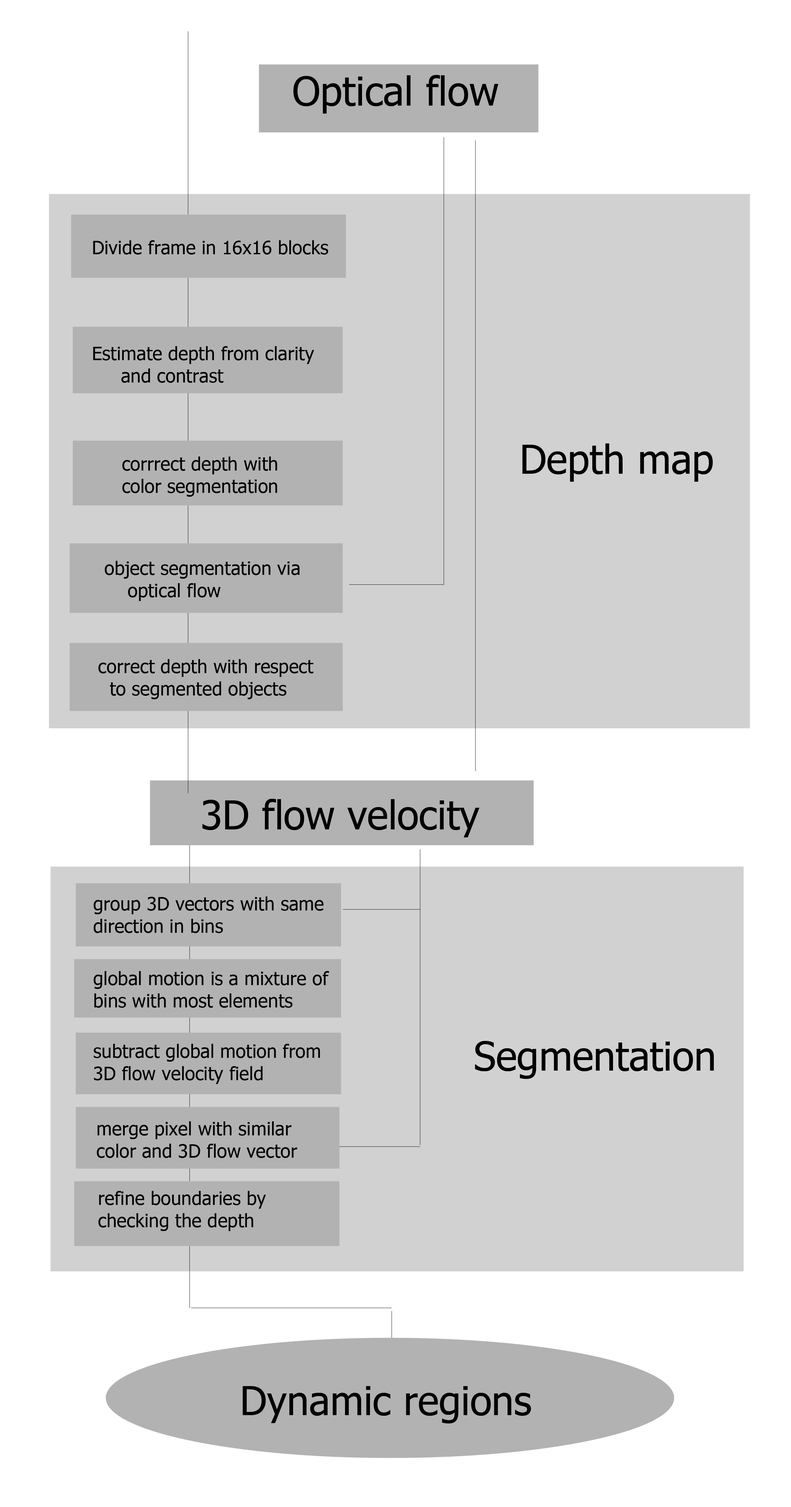
<style>
.page{position:relative;width:791px;height:1507px;background:#d1d1d1}
.page>*{position:absolute;margin:0}
.t1{font:39.9px "Tahoma";color:#000000}
.t2{font:18.6px "Tahoma";color:#000000}
</style>
<div class="page">
<p class="t1" style="left:294px;top:75px;width:204px;height:39px">Optical flow</p>
<p class="t2" style="left:93px;top:240px;width:235px;height:15px">Divide frame in 16x16 blocks</p>
<p class="t2" style="left:93px;top:346px;width:221px;height:37px">Estimate depth from clarity <br>     and contrast</p>
<p class="t1" style="left:523px;top:443px;width:190px;height:39px">Depth map</p>
<p class="t2" style="left:122px;top:457px;width:155px;height:40px">corrrect depth with <br>color segmentation</p>
<p class="t2" style="left:105px;top:561px;width:195px;height:40px">object segmentation via<br>    optical flow</p>
<p class="t2" style="left:98px;top:659px;width:216px;height:40px">correct depth with respect <br>  to segmented objects</p>
<p class="t1" style="left:202px;top:799px;width:278px;height:38px">3D flow velocity</p>
<p class="t2" style="left:93px;top:896px;width:230px;height:37px">group 3D vectors with same <br>direction in bins</p>
<p class="t2" style="left:93px;top:971px;width:236px;height:37px">global motion is a mixture of<br>bins with most elements</p>
<p class="t2" style="left:93px;top:1044px;width:227px;height:40px">subtract global motion from<br>3D flow velocity field</p>
<p class="t1" style="left:475px;top:1041px;width:239px;height:38px">Segmentation</p>
<p class="t2" style="left:97px;top:1121px;width:200px;height:37px">merge pixel with similar<br>color and 3D flow vector</p>
<p class="t2" style="left:98px;top:1191px;width:168px;height:40px">refine boundaries by<br>checking the depth</p>
<p class="t1" style="left:243px;top:1386px;width:288px;height:38px">Dynamic regions</p>
</div>
